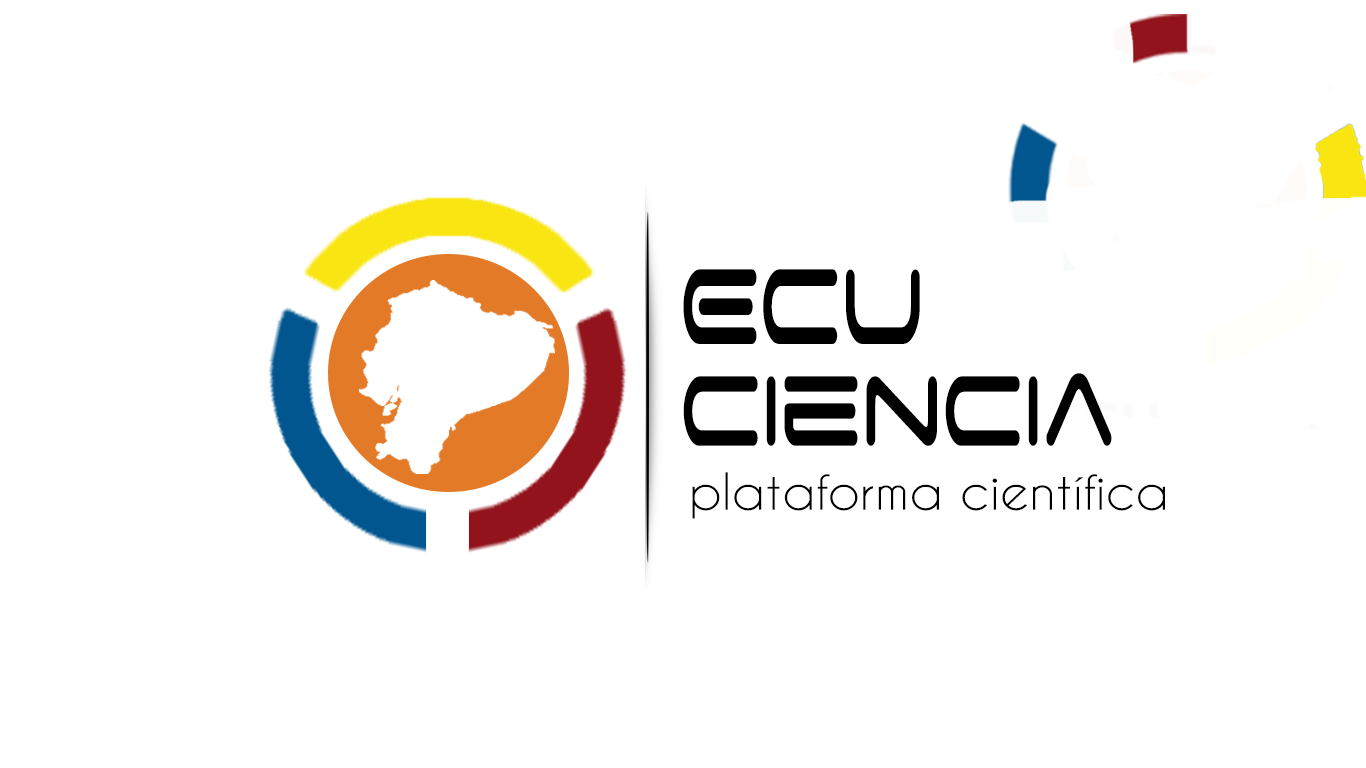
<style>
.page{position:relative;width:1366px;height:768px;background:#ffffff}
.page>*{position:absolute;margin:0}
.t1{font:170.5px "SpaceAge";color:#000000;scale:0.53 1}
.t2{font:158.7px "SpaceAge";color:#000000;scale:0.57 1}
.t3{font:48px "CaviarDreams";color:#000000;scale:1.06 1}
</style>
<div class="page">
<p class="t1" style="left:683px;top:269px;width:237px;height:75px">Ecu</p>
<p class="t2" style="left:683px;top:373px;width:429px;height:73px">ciencia</p>
<p class="t3" style="left:692px;top:472px;width:473px;height:47px">plataforma científica</p>
</div>
